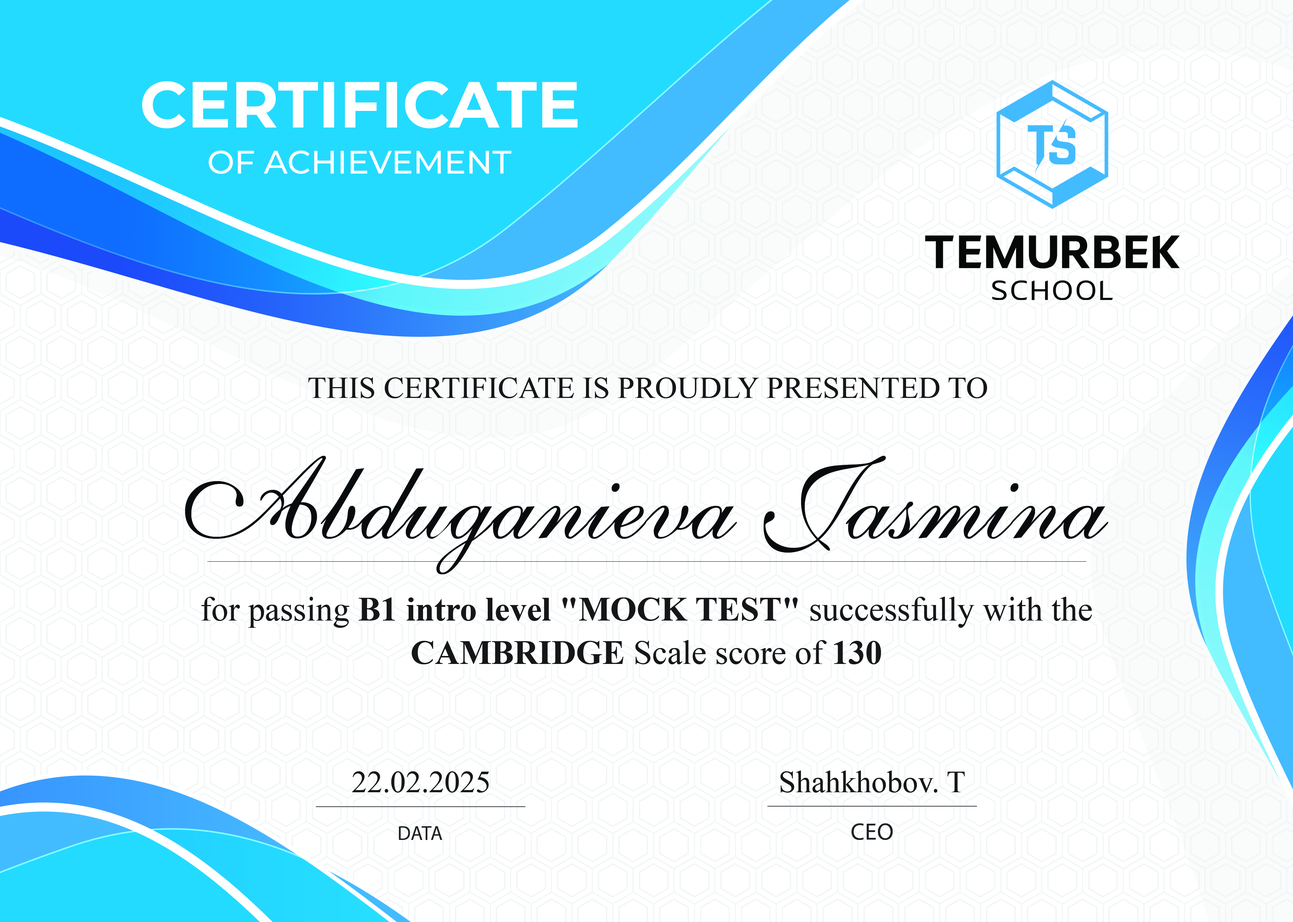
<style>
.page{position:relative;width:1293px;height:922px;background:#ffffff}
.page>*{position:absolute;margin:0}
.t1{font:30.8px "TimesNewRomanPSMT";color:#141618}
.t2{font:114.4px "1ShelleyVolante";color:#080b0e}
.t3{font:33.9px/43.5px "TimesNewRomanPSMT";color:#141618}
.t4{font:33.9px/43.5px "TimesNewRomanPS-BoldMT";color:#141618}
.t5{font:33.9px/43.5px "TimesNewRomanPS-BoldMT";color:#141618;text-transform:uppercase}
.t6{font:31px "TimesNewRomanPSMT";color:#141618}
.t7{font:19.9px "MyriadPro-Regular";color:#1b2021;text-transform:uppercase}
.t8{font:23.7px "MyriadPro-Regular";color:#1b2021;text-transform:uppercase}
</style>
<div class="page">
<p class="t1" style="left:308px;top:377px;width:680px;height:21px">THIS CERTIFICATE IS PROUDLY PRESENTED TO</p>
<p class="t2" style="left:185px;top:456px;width:924px;height:118px">Abduganieva Jasmina</p>
<p class="t3" style="left:201px;top:597px;width:891px;height:67px;text-align:center">for passing <span class="t4">B1 intro level </span><span class="t5">"Mock test"</span> successfully with the <span class="t5">Cambridge</span> Scale score of <span class="t4">130</span></p>
<p class="t6" style="left:352px;top:771px;width:137px;height:22px">22.02.2025</p>
<p class="t6" style="left:781px;top:770px;width:184px;height:23px">Shahkhobov. T</p>
<p class="t7" style="left:399px;top:826px;width:43px;height:14px">data</p>
<p class="t8" style="left:852px;top:823px;width:41px;height:17px">ceo</p>
</div>
